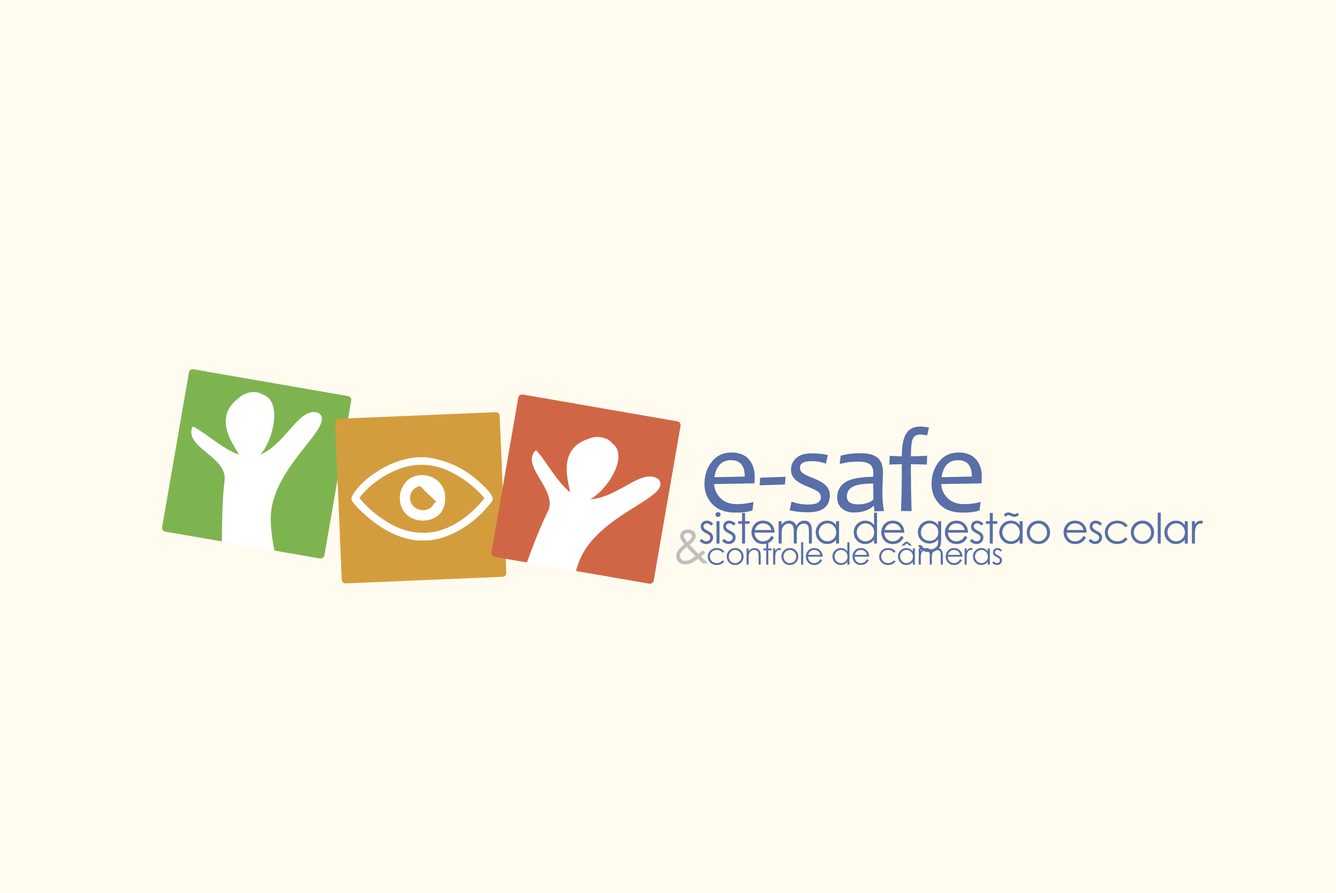
<style>
.page{position:relative;width:1336px;height:893px;background:#fffbef}
.page>*{position:absolute;margin:0}
.t1{font:120.2px "Candara";letter-spacing:-0.025em;color:#586fa8}
.t2{font:41.8px "CenturyGothic";letter-spacing:-0.025em;color:#586fa8}
.t3{font:48.8px "CenturyGothic";letter-spacing:-0.025em;color:#bebebe}
.t4{font:30.3px "CenturyGothic";letter-spacing:-0.025em;color:#586fa8}
</style>
<div class="page">
<p class="t1" style="left:704px;top:426px;width:278px;height:87px">e-safe</p>
<p class="t2" style="left:699px;top:512px;width:504px;height:40px">sistema de gestão escolar</p>
<p class="t3" style="left:676px;top:529px;width:32px;height:35px">&amp;</p>
<p class="t4" style="left:707px;top:541px;width:295px;height:24px">controle de câmeras</p>
</div>
